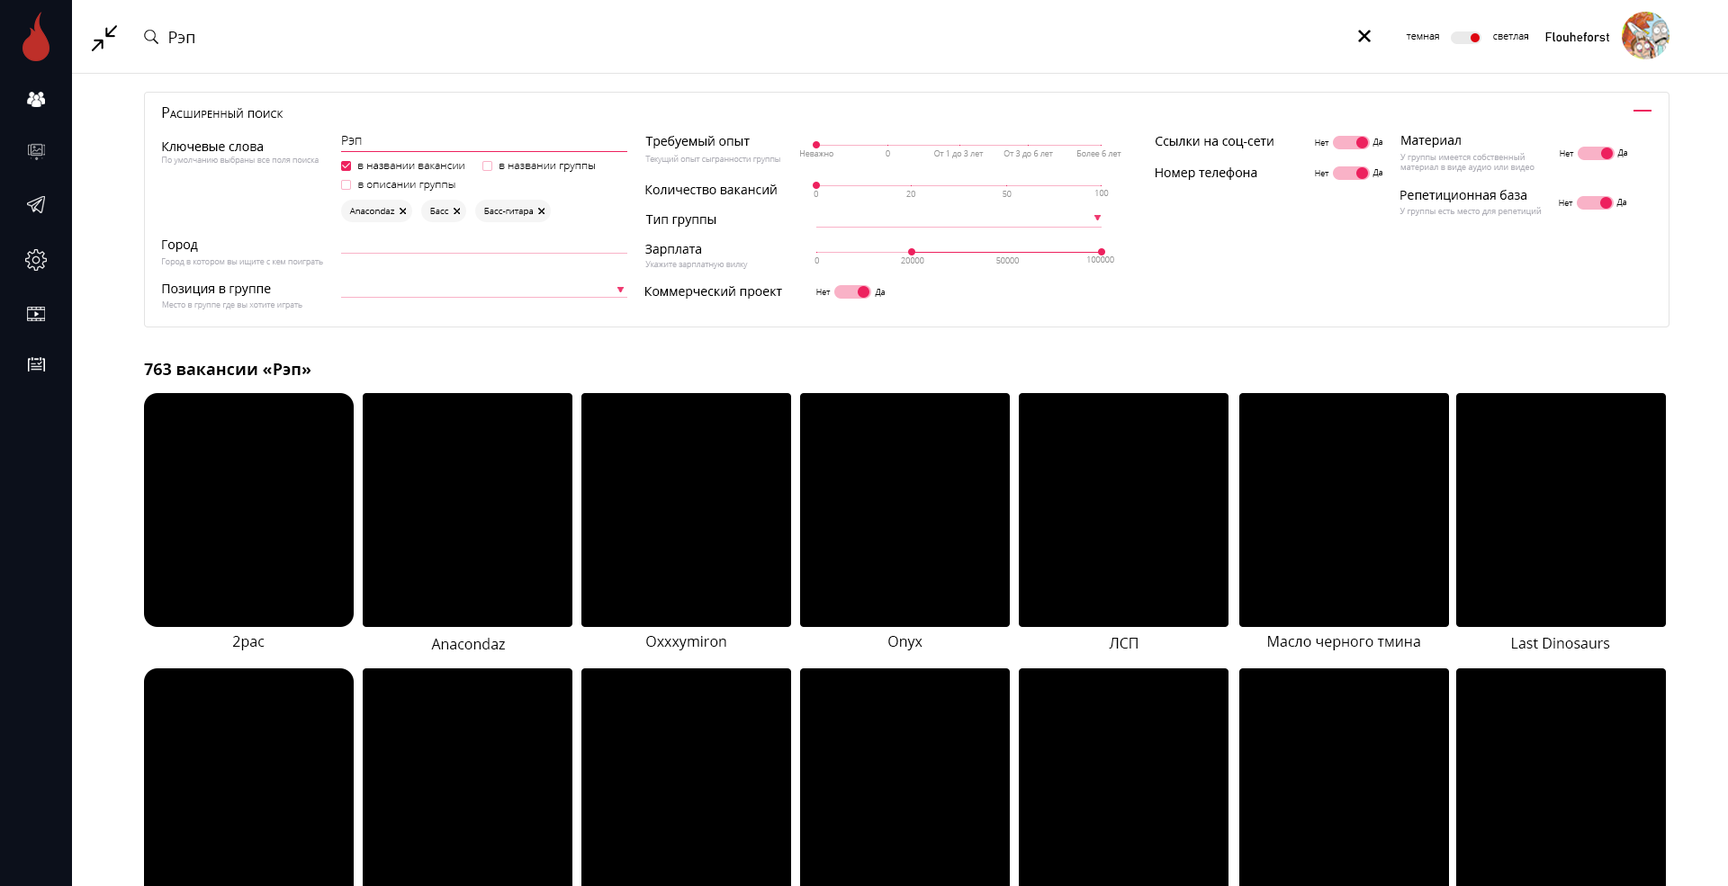
<style>
.page{position:relative;width:1728px;height:886px;background:#ffffff}
.page>*{position:absolute;margin:0}
.t1{font:16.2px "OpenSans";color:#000000}
.t2{font:9.9px "OpenSans-Light";color:#000000}
.t3{font:12.6px "Bahnschrift";color:#000000}
.t4{font:14.4px "OpenSans";color:#000000;font-variant:small-caps}
.t5{font:12.6px "OpenSans-Light";color:#000000}
.t6{font:12.6px "OpenSans";color:#000000}
.t7{font:8.1px "OpenSans-Light";color:#000000}
.t8{font:8.1px "OpenSans-Light";color:#afafb7}
.t9{font:8.1px "OpenSans-Light";color:#9a9a9a}
.t10{font:8.1px "OpenSans";color:#afafb7}
.t11{font:10.8px "OpenSans-Light";color:#000000}
.t12{font:9px "OpenSans-Light";color:#000000}
.t13{font:16.2px "OpenSans-Bold";color:#000000}
.t14{font:14.4px "OpenSans";color:#000000}
</style>
<div class="page">
<p class="t1" style="left:169px;top:32px;width:25px;height:11px">Рэп</p>
<p class="t2" style="left:1406px;top:34px;width:33px;height:6px">темная</p>
<p class="t2" style="left:1493px;top:34px;width:35px;height:6px">светлая</p>
<p class="t3" style="left:1545px;top:32px;width:65px;height:10px">Flouheforst</p>
<p class="t4" style="left:162px;top:107px;width:122px;height:11px">Расширенный поиск</p>
<p class="t5" style="left:342px;top:136px;width:20px;height:9px">Рэп</p>
<p class="t6" style="left:645px;top:136px;width:105px;height:12px">Требуемый опыт</p>
<p class="t6" style="left:1156px;top:137px;width:118px;height:11px">Ссылки на соц-сети</p>
<p class="t6" style="left:1401px;top:136px;width:60px;height:12px">Материал</p>
<p class="t6" style="left:162px;top:142px;width:101px;height:9px">Ключевые слова</p>
<p class="t7" style="left:1315px;top:140px;width:14px;height:6px">Нет</p>
<p class="t7" style="left:1372px;top:139px;width:10px;height:8px">Да</p>
<p class="t7" style="left:1617px;top:149px;width:10px;height:9px">Да</p>
<p class="t8" style="left:162px;top:157px;width:157px;height:8px">По умолчанию выбраны все поля поиска</p>
<p class="t8" style="left:645px;top:155px;width:135px;height:9px">Текущий опыт сыгранности группы</p>
<p class="t9" style="left:800px;top:150px;width:33px;height:7px">Неважно</p>
<p class="t9" style="left:886px;top:150px;width:4px;height:7px">0</p>
<p class="t9" style="left:934px;top:150px;width:50px;height:8px">От 1 до 3 лет</p>
<p class="t9" style="left:1004px;top:150px;width:49px;height:8px">От 3 до 6 лет</p>
<p class="t9" style="left:1077px;top:150px;width:44px;height:7px">Более 6 лет</p>
<p class="t10" style="left:1400px;top:153px;width:134px;height:19px">У группы имеется собственный<br>материал в виде аудио или видео</p>
<p class="t7" style="left:1560px;top:150px;width:14px;height:7px">Нет</p>
<p class="t11" style="left:358px;top:164px;width:106px;height:5px">в названии вакансии</p>
<p class="t11" style="left:500px;top:164px;width:95px;height:8px">в названии группы</p>
<p class="t6" style="left:1156px;top:167px;width:101px;height:13px">Номер телефона</p>
<p class="t7" style="left:1315px;top:170px;width:14px;height:6px">Нет</p>
<p class="t7" style="left:1372px;top:169px;width:10px;height:8px">Да</p>
<p class="t11" style="left:358px;top:183px;width:97px;height:8px">в описании группы</p>
<p class="t6" style="left:645px;top:184px;width:132px;height:10px">Количество вакансий</p>
<p class="t9" style="left:814px;top:191px;width:4px;height:6px">0</p>
<p class="t9" style="left:906px;top:191px;width:9px;height:6px">20</p>
<p class="t9" style="left:1003px;top:191px;width:9px;height:6px">50</p>
<p class="t9" style="left:1095px;top:190px;width:14px;height:6px">100</p>
<p class="t6" style="left:1400px;top:190px;width:126px;height:12px">Репетиционная база</p>
<p class="t12" style="left:349px;top:208px;width:46px;height:6px">Anacondaz</p>
<p class="t12" style="left:430px;top:208px;width:19px;height:6px">Басс</p>
<p class="t12" style="left:484px;top:208px;width:49px;height:8px">Басс-гитара</p>
<p class="t10" style="left:1400px;top:207px;width:142px;height:9px">У группы есть место для репетиций</p>
<p class="t7" style="left:1559px;top:200px;width:14px;height:6px">Нет</p>
<p class="t7" style="left:1616px;top:199px;width:10px;height:8px">Да</p>
<p class="t6" style="left:645px;top:215px;width:71px;height:12px">Тип группы</p>
<p class="t6" style="left:162px;top:240px;width:36px;height:12px">Город</p>
<p class="t6" style="left:645px;top:245px;width:56px;height:11px">Зарплата</p>
<p class="t9" style="left:814px;top:257px;width:5px;height:7px">0</p>
<p class="t9" style="left:901px;top:257px;width:23px;height:7px">20000</p>
<p class="t9" style="left:996px;top:257px;width:23px;height:7px">50000</p>
<p class="t9" style="left:1087px;top:256px;width:27px;height:7px">100000</p>
<p class="t8" style="left:162px;top:258px;width:161px;height:8px">Город в котором вы ищите с кем поиграть</p>
<p class="t8" style="left:645px;top:261px;width:103px;height:8px">Укажите зарплатную вилку</p>
<p class="t6" style="left:162px;top:284px;width:109px;height:12px">Позиция в группе</p>
<p class="t6" style="left:645px;top:286px;width:137px;height:13px">Коммерческий проект</p>
<p class="t7" style="left:816px;top:289px;width:15px;height:6px">Нет</p>
<p class="t7" style="left:875px;top:289px;width:10px;height:8px">Да</p>
<p class="t8" style="left:162px;top:302px;width:140px;height:8px">Место в группе где вы хотите играть</p>
<p class="t13" style="left:144px;top:364px;width:167px;height:11px">763 вакансии «Рэп»</p>
<p class="t14" style="left:232px;top:636px;width:33px;height:15px">2pac</p>
<p class="t14" style="left:431px;top:638px;width:74px;height:12px">Anacondaz</p>
<p class="t14" style="left:646px;top:636px;width:80px;height:15px">Oxxxymiron</p>
<p class="t14" style="left:888px;top:636px;width:34px;height:15px">Onyx</p>
<p class="t14" style="left:1109px;top:638px;width:29px;height:11px">ЛСП</p>
<p class="t14" style="left:1268px;top:636px;width:152px;height:15px">Масло черного тмина</p>
<p class="t14" style="left:1512px;top:638px;width:98px;height:11px">Last Dinosaurs</p>
</div>
